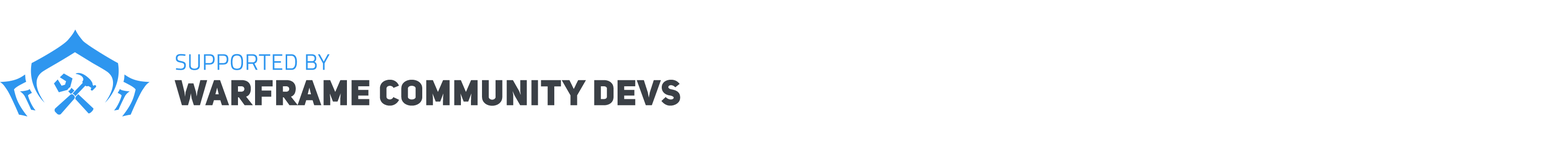
<style>
.page{position:relative;width:1568px;height:157px;background:#ffffff}
.page>*{position:absolute;margin:0}
.t1{font:35.2px/35.4px "UniSansHeavyCAPS";color:#3b4046;font-weight:bold}
.t2{font:22.1px/35.4px "TitilliumWeb-Light";color:#2e96ef;font-weight:bold}
</style>
<div class="page">
<p class="t1" style="left:175px;top:54px;width:505px;height:52px"><span class="t2">SUPPORTED BY<br></span>WARFRAME COMMUNITY DEVS</p>
</div>
